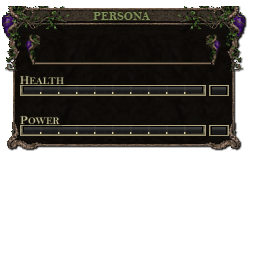
<style>
.page{position:relative;width:256px;height:256px;background:#ffffff}
.page>*{position:absolute;margin:0}
.t1{font:12px "BellMTBold";color:#7f8e5a}
.t2{font:10px "BellMTBold";color:#bcb390}
.t3{font:12px "BellMTBold";color:#bcb390}
</style>
<div class="page">
<p class="t1" style="left:93px;top:12px;width:58px;height:8px">PERSONA</p>
<p class="t2" style="left:20px;top:76px;width:44px;height:8px"><span class="t3">H</span>EALTH</p>
<p class="t2" style="left:20px;top:116px;width:40px;height:8px"><span class="t3">P</span>OWER</p>
</div>
